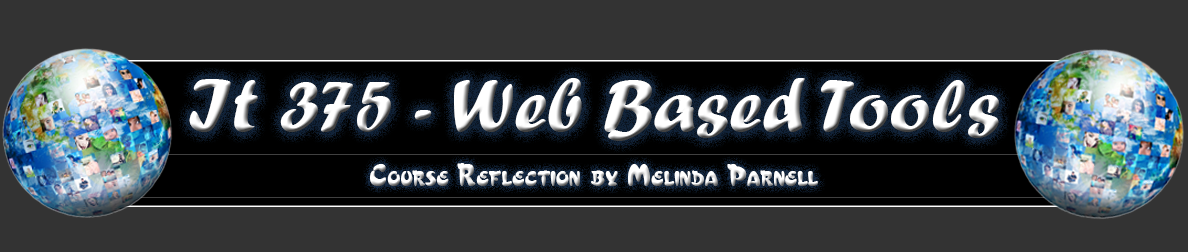
<style>
.page{position:relative;width:1188px;height:252px;background:#333333}
.page>*{position:absolute;margin:0}
.t1{font:77.1px "ForteMT";color:#ffffff}
.t2{font:32px "Cressida";letter-spacing:0.01em;font-variant:small-caps}
</style>
<div class="page">
<p class="t1" style="left:189px;top:78px;width:810px;height:63px">It 375 - Web Based Tools</p>
<p class="t2" style="left:370px;top:163px;width:448px;height:23px">Course Reflection by Melinda Parnell</p>
</div>
